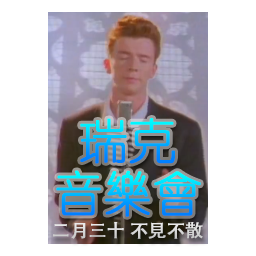
<style>
.page{position:relative;width:256px;height:256px;background:#ffffff}
.page>*{position:absolute;margin:0}
.t1{font:48px "YouYuan";font-weight:bold}
.t2{font:18px "AdobeHeitiStd-Regular";color:#dcdcdc;font-weight:bold}
</style>
<div class="page">
<p class="t1" style="left:80px;top:118px;width:95px;height:46px">瑞克</p>
<p class="t1" style="left:56px;top:170px;width:145px;height:47px">音樂會</p>
<p class="t2" style="left:53px;top:222px;width:150px;height:17px">二月三十 不見不散</p>
</div>
